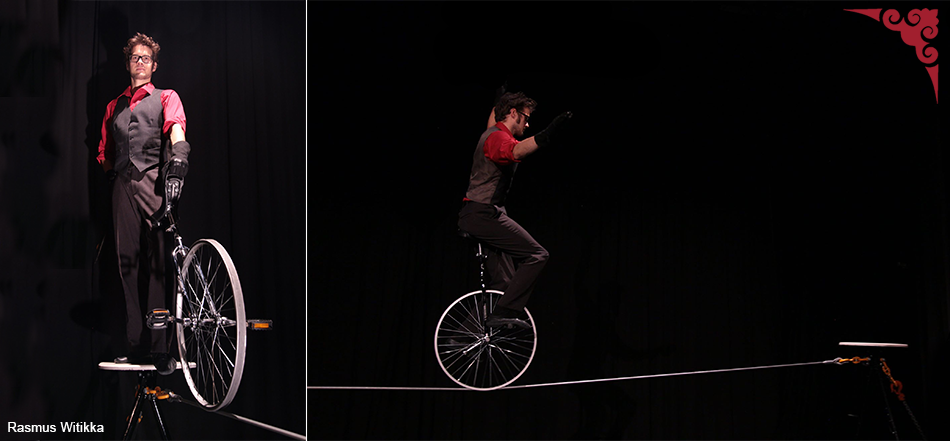
<style>
.page{position:relative;width:950px;height:441px;background:#010101}
.page>*{position:absolute;margin:0}
.t1{font:12.5px "ArialMT";letter-spacing:0.04em;color:#ffffff}
</style>
<div class="page">
<p class="t1" style="left:8px;top:422px;width:96px;height:10px">Rasmus Witikka</p>
</div>
